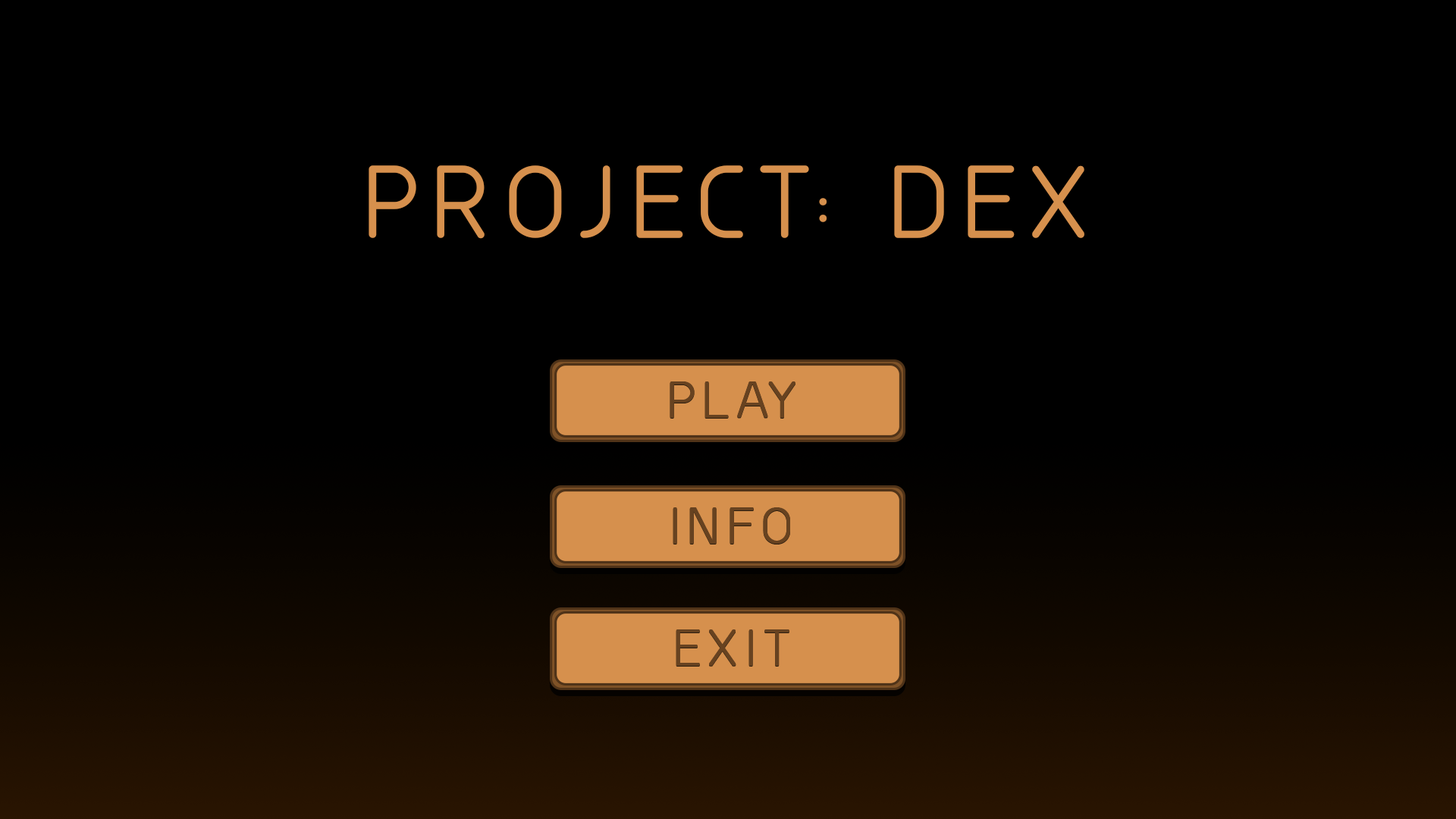
<style>
.page{position:relative;width:1456px;height:819px;background:#000000}
.page>*{position:absolute;margin:0}
.t1{font:91.8px "GreyscaleBasic";letter-spacing:0.15em;color:#d6904d;font-weight:bold}
.t2{font:47px "GreyscaleBasic";letter-spacing:0.15em;color:#674220;font-weight:bold}
</style>
<div class="page">
<p class="t1" style="left:369px;top:165px;width:715px;height:74px">PROJECT: DEX</p>
<p class="t2" style="left:670px;top:381px;width:125px;height:37px">PLAY</p>
<p class="t2" style="left:673px;top:507px;width:117px;height:37px">INFO</p>
<p class="t2" style="left:676px;top:629px;width:113px;height:37px">EXIT</p>
</div>
